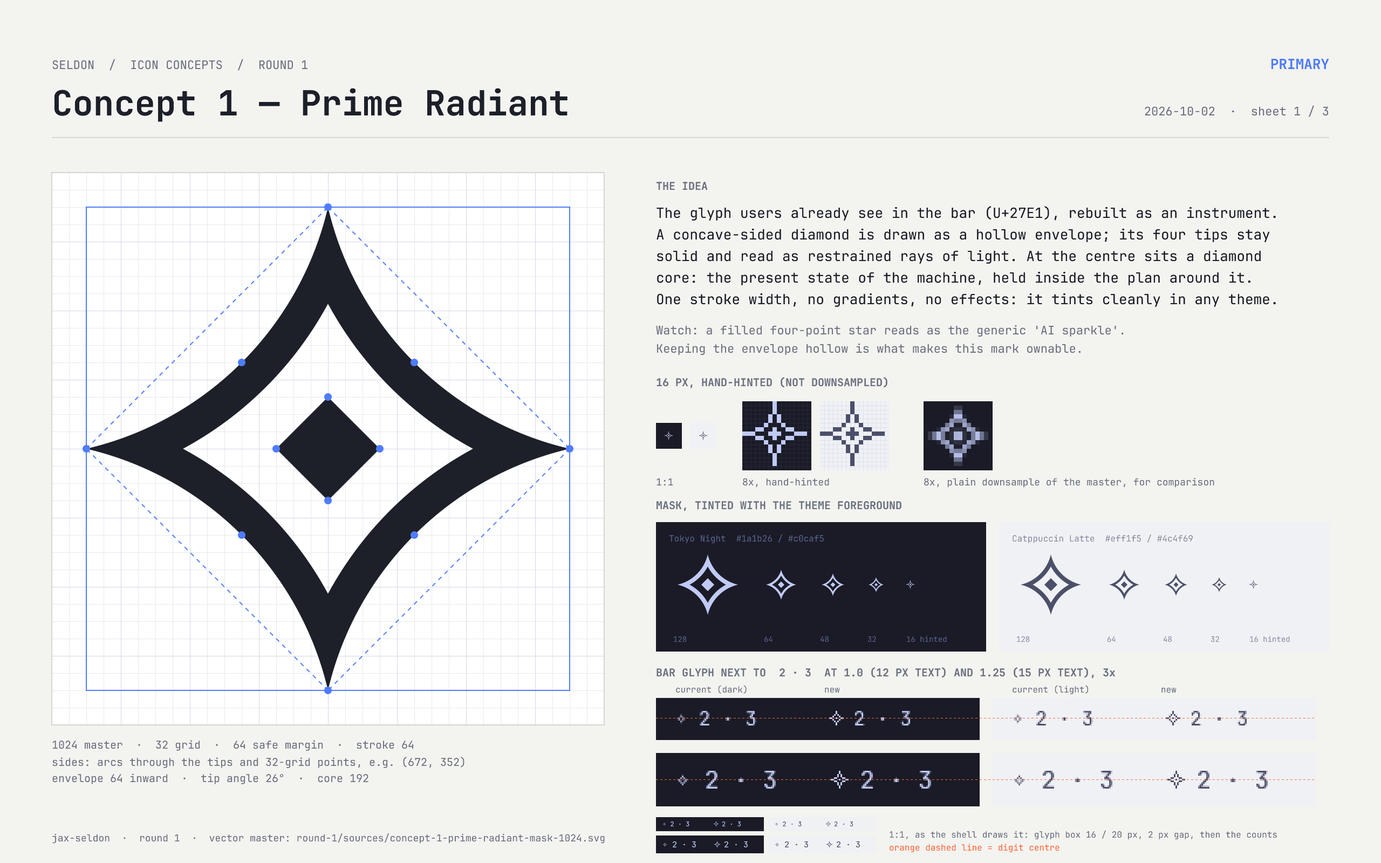
<style>
.page{position:relative;width:1381px;height:863px;background:#f3f3f0}
.page>*{position:absolute;margin:0}
.t1{font:11.9px "JetBrainsMonoNF-Regular";color:#6d7280}
.t2{font:14px "JetBrainsMonoNF-Bold";color:#4f7cff}
.t3{font:34.5px "JetBrainsMonoNF-Bold";color:#1d2029}
.t4{font:10.8px "JetBrainsMonoNF-Bold";color:#6d7280}
.t5{font:14px "JetBrainsMonoNF-Regular";color:#1d2029}
.t6{font:9.7px "JetBrainsMonoNF-Regular";color:#6d7280}
.t7{font:8.6px "JetBrainsMonoNF-Regular";color:#565f89}
.t8{font:8.6px "JetBrainsMonoNF-Regular";color:#8c8fa1}
.t9{font:7.6px "JetBrainsMonoNF-Regular";color:#565f89}
.t10{font:7.6px "JetBrainsMonoNF-Regular";color:#8c8fa1}
.t11{font:8.6px "JetBrainsMonoNF-Regular";color:#6d7280}
.t12{font:10.8px "JetBrainsMonoNF-Regular";color:#6d7280}
.t13{font:8.6px "JetBrainsMonoNF-Regular";color:#ff6a3d}
</style>
<div class="page">
<p class="t1" style="left:52px;top:59px;width:256px;height:12px">SELDON  /  ICON CONCEPTS  /  ROUND 1</p>
<p class="t2" style="left:1271px;top:59px;width:58px;height:10px">PRIMARY</p>
<p class="t3" style="left:54px;top:88px;width:514px;height:34px">Concept 1 — Prime Radiant</p>
<p class="t1" style="left:1145px;top:105px;width:183px;height:12px">2026-10-02  ·  sheet 1 / 3</p>
<p class="t4" style="left:657px;top:182px;width:51px;height:8px">THE IDEA</p>
<p class="t5" style="left:657px;top:206px;width:619px;height:15px">The glyph users already see in the bar (U+27E1), rebuilt as an instrument.</p>
<p class="t5" style="left:657px;top:228px;width:613px;height:14px">A concave-sided diamond is drawn as a hollow envelope; its four tips stay</p>
<p class="t5" style="left:657px;top:250px;width:604px;height:14px">solid and read as restrained rays of light. At the centre sits a diamond</p>
<p class="t5" style="left:657px;top:271px;width:594px;height:14px">core: the present state of the machine, held inside the plan around it.</p>
<p class="t5" style="left:657px;top:293px;width:619px;height:14px">One stroke width, no gradients, no effects: it tints cleanly in any theme.</p>
<p class="t1" style="left:656px;top:325px;width:468px;height:12px">Watch: a filled four-point star reads as the generic 'AI sparkle'.</p>
<p class="t1" style="left:657px;top:344px;width:424px;height:11px">Keeping the envelope hollow is what makes this mark ownable.</p>
<p class="t4" style="left:657px;top:377px;width:231px;height:11px">16 PX, HAND-HINTED (NOT DOWNSAMPLED)</p>
<p class="t6" style="left:657px;top:478px;width:16px;height:8px">1:1</p>
<p class="t6" style="left:743px;top:478px;width:86px;height:9px">8x, hand-hinted</p>
<p class="t6" style="left:924px;top:478px;width:291px;height:10px">8x, plain downsample of the master, for comparison</p>
<p class="t4" style="left:657px;top:501px;width:245px;height:10px">MASK, TINTED WITH THE THEME FOREGROUND</p>
<p class="t7" style="left:670px;top:534px;width:154px;height:9px">Tokyo Night  #1a1b26 / #c0caf5</p>
<p class="t8" style="left:1013px;top:534px;width:180px;height:9px">Catppuccin Latte  #eff1f5 / #4c4f69</p>
<p class="t9" style="left:674px;top:636px;width:13px;height:7px">128</p>
<p class="t9" style="left:765px;top:636px;width:8px;height:7px">64</p>
<p class="t9" style="left:821px;top:636px;width:8px;height:7px">48</p>
<p class="t9" style="left:868px;top:636px;width:8px;height:7px">32</p>
<p class="t9" style="left:907px;top:636px;width:40px;height:7px">16 hinted</p>
<p class="t10" style="left:1017px;top:636px;width:13px;height:7px">128</p>
<p class="t10" style="left:1108px;top:636px;width:8px;height:7px">64</p>
<p class="t10" style="left:1164px;top:636px;width:8px;height:7px">48</p>
<p class="t10" style="left:1211px;top:636px;width:8px;height:7px">32</p>
<p class="t10" style="left:1250px;top:636px;width:40px;height:7px">16 hinted</p>
<p class="t4" style="left:657px;top:667px;width:458px;height:12px">BAR GLYPH NEXT TO  2 · 3  AT 1.0 (12 PX TEXT) AND 1.25 (15 PX TEXT), 3x</p>
<p class="t11" style="left:676px;top:685px;width:71px;height:9px">current (dark)</p>
<p class="t11" style="left:825px;top:688px;width:15px;height:5px">new</p>
<p class="t11" style="left:1013px;top:685px;width:75px;height:9px">current (light)</p>
<p class="t11" style="left:1162px;top:688px;width:15px;height:5px">new</p>
<p class="t12" style="left:52px;top:740px;width:361px;height:11px">1024 master  ·  32 grid  ·  64 safe margin  ·  stroke 64</p>
<p class="t12" style="left:52px;top:757px;width:413px;height:11px">sides: arcs through the tips and 32-grid points, e.g. (672, 352)</p>
<p class="t12" style="left:52px;top:774px;width:317px;height:11px">envelope 64 inward  ·  tip angle 26°  ·  core 192</p>
<p class="t6" style="left:52px;top:834px;width:553px;height:10px">jax-seldon  ·  round 1  ·  vector master: round-1/sources/concept-1-prime-radiant-mask-1024.svg</p>
<p class="t11" style="left:890px;top:830px;width:387px;height:10px">1:1, as the shell draws it: glyph box 16 / 20 px, 2 px gap, then the counts</p>
<p class="t13" style="left:890px;top:844px;width:170px;height:8px">orange dashed line = digit centre</p>
</div>
